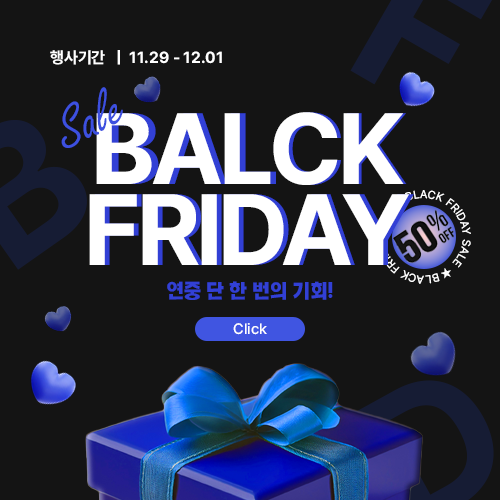
<style>
.page{position:relative;width:500px;height:500px;background:#141414}
.page>*{position:absolute;margin:0}
.t1{font:16px "Pretendard-Bold";color:#ffffff}
.t2{font:62.1px "FreestyleScript-Regular";color:#3d50e0}
.t3{font:100px/81px "Pretendard-Bold";letter-spacing:-0.04em;color:#ffffff}
.t4{font:11.2px "Pretendard-Regular";letter-spacing:0.075em;color:#ffffff}
.t5{font:18px "KOTRA_BOLD-Bold";color:#3240d5}
.t6{font:15px "Pretendard-Medium";color:#ffffff}
</style>
<div class="page">
<p class="t1" style="left:50px;top:50px;width:172px;height:15px">행사기간   |  11.29 - 12.01</p>
<p class="t2" style="left:61px;top:87px;width:62px;height:61px;rotate:-27deg">Sale</p>
<p class="t3" style="left:89px;top:112px;width:320px;height:153px;text-align:center">BALCK<br>FRIDAY</p>
<p class="t3" style="left:95px;top:112px;width:319px;height:153px;text-align:center">BALCK<br>FRIDAY</p>
<p class="t4" style="left:376px;top:190px;width:95px;height:94px;rotate:102deg">BLACK FRIDAY SALE ★ BLACK FRIDAY SALE ★</p>
<p class="t5" style="left:167px;top:281px;width:166px;height:19px">연중 단 한 번의 기회!</p>
<p class="t6" style="left:233px;top:323px;width:34px;height:12px">Click</p>
</div>
